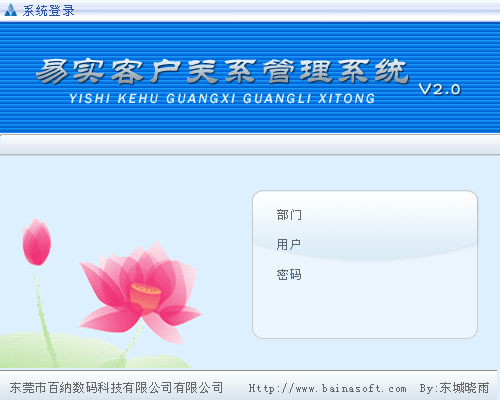
<style>
.page{position:relative;width:500px;height:400px;background:#dcf0ff}
.page>*{position:absolute;margin:0}
.t1{font:36px "STLiti";letter-spacing:0.05em}
.t2{font:18px "FZSTK--GBK1-0";letter-spacing:0.075em;color:#dcf0ff;font-weight:bold}
.t3{font:14px "FranklinGothic-MediumItalic";letter-spacing:0.16em;color:#dcf0ff}
.t4{font:12px "SimSun";letter-spacing:0.075em;color:#666666}
.t5{font:12px "SimSun";letter-spacing:0.05em;color:#666666}
</style>
<div class="page">
<p class="t1" style="left:36px;top:57px;width:372px;height:27px">易实客户关系管理系统</p>
<p class="t2" style="left:418px;top:83px;width:42px;height:12px">V2.0</p>
<p class="t3" style="left:69px;top:93px;width:306px;height:11px">YISHI KEHU GUANGXI GUANGLI XITONG</p>
<p class="t4" style="left:277px;top:209px;width:24px;height:11px">部门</p>
<p class="t5" style="left:10px;top:382px;width:479px;height:12px">东莞市百纳数码科技有限公司有限公司　　Http://www.bainasoft.com　By:东城晓雨</p>
</div>
